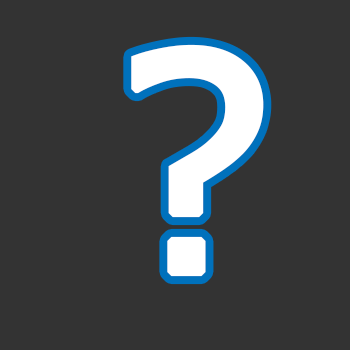
<style>
.page{position:relative;width:350px;height:350px;background:#333333}
.page>*{position:absolute;margin:0}
.t1{font:300.2px "Verdana";color:#ffffff;font-weight:bold}
</style>
<div class="page">
<p class="t1" style="left:131px;top:44px;width:133px;height:233px">?</p>
</div>
